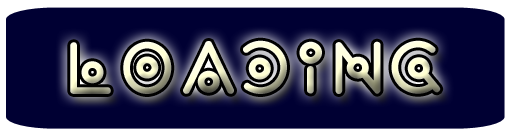
<style>
.page{position:relative;width:512px;height:138px;background:#000033}
.page>*{position:absolute;margin:0}
.t1{font:75px "wearealien!!"}
</style>
<div class="page">
<p class="t1" style="left:70px;top:40px;width:371px;height:54px">Loading</p>
</div>
